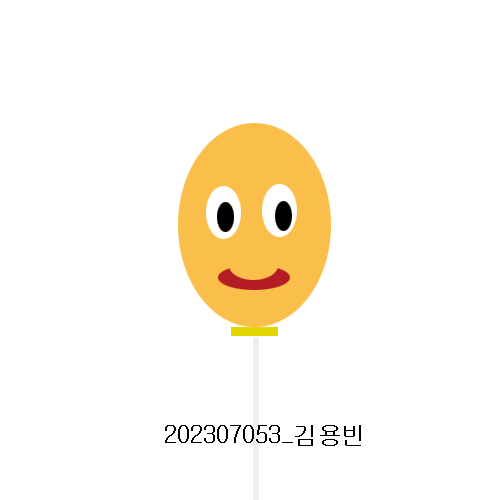
<style>
.page{position:relative;width:500px;height:500px;background:#ffffff}
.page>*{position:absolute;margin:0}
.t1{font:24px "Gulim";color:#000000}
</style>
<div class="page">
<p class="t1" style="left:165px;top:425px;width:196px;height:21px">202307053_김용빈</p>
</div>
